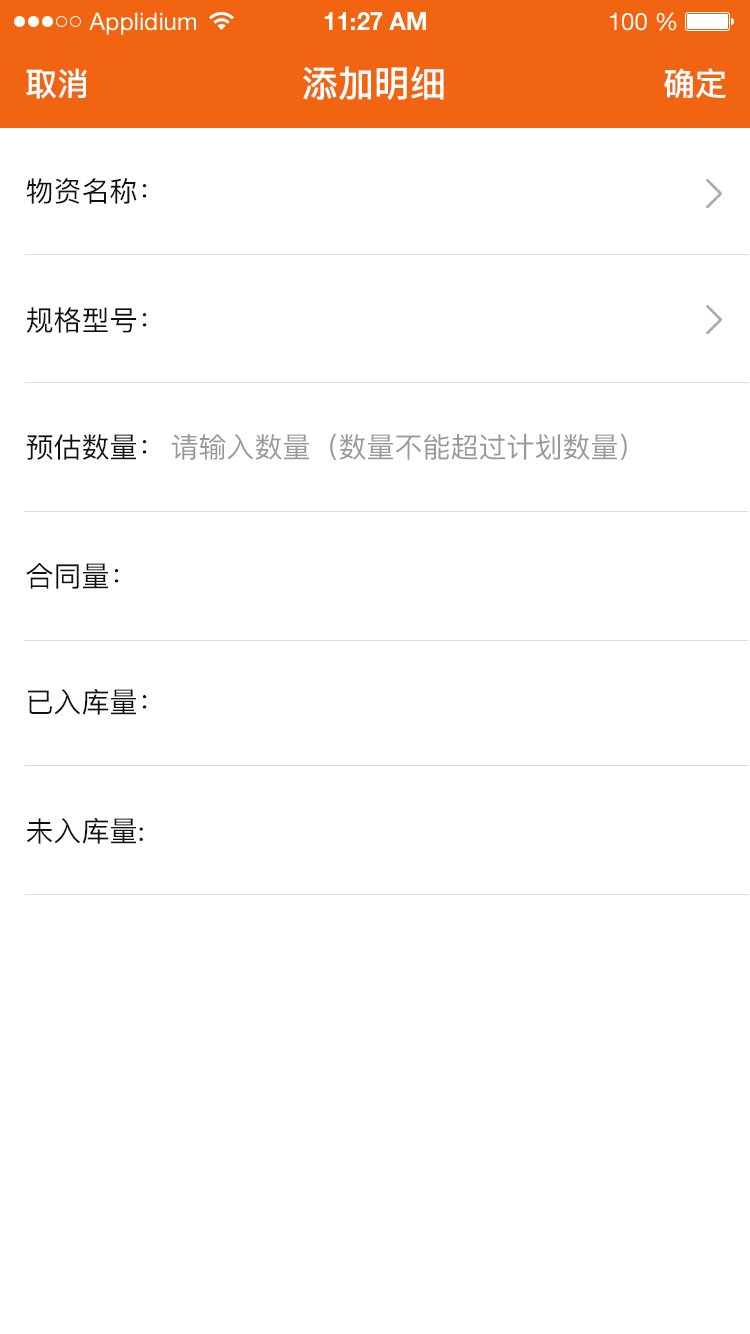
<style>
.page{position:relative;width:750px;height:1334px;background:#ffffff}
.page>*{position:absolute;margin:0}
.t1{font:32px "PingFang-SC-Bold";color:#ffffff}
.t2{font:36px "PingFang-SC-Bold";color:#ffffff}
.t3{font:28px "PingFang-SC-Medium";color:#111111}
.t4{font:28px "PingFang-SC-Medium";color:#999999}
</style>
<div class="page">
<p class="t1" style="left:26px;top:68px;width:61px;height:31px">取消</p>
<p class="t2" style="left:303px;top:66px;width:141px;height:34px">添加明细</p>
<p class="t1" style="left:664px;top:68px;width:62px;height:31px">确定</p>
<p class="t3" style="left:26px;top:178px;width:121px;height:26px">物资名称：</p>
<p class="t3" style="left:26px;top:307px;width:121px;height:26px">规格型号：</p>
<p class="t3" style="left:26px;top:434px;width:121px;height:26px">预估数量：</p>
<p class="t4" style="left:171px;top:433px;width:456px;height:27px">请输入数量（数量不能超过计划数量）</p>
<p class="t3" style="left:26px;top:563px;width:93px;height:26px">合同量：</p>
<p class="t3" style="left:28px;top:689px;width:119px;height:26px">已入库量：</p>
<p class="t3" style="left:27px;top:818px;width:116px;height:26px">未入库量:</p>
</div>
